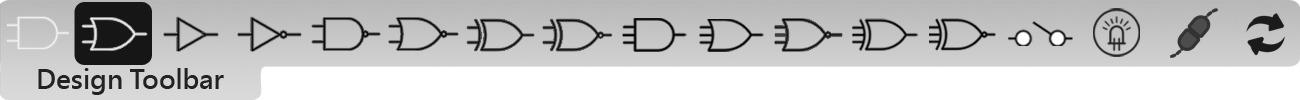
<style>
.page{position:relative;width:1300px;height:100px;background:#ffffff}
.page>*{position:absolute;margin:0}
.t1{font:26px "MicrosoftJhengHeiBold";color:#222222}
</style>
<div class="page">
<p class="t1" style="left:38px;top:68px;width:186px;height:27px">Design Toolbar</p>
</div>
